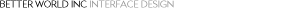
<style>
.page{position:relative;width:288px;height:8px;background:#ffffff}
.page>*{position:absolute;margin:0}
.t1{font:9.7px "MetroLite-Two";letter-spacing:-0.04em;color:#000000}
.t2{font:9.7px "MetroLite-Two";letter-spacing:-0.04em;color:#959595}
</style>
<div class="page">
<p class="t1" style="left:0px;top:0px;width:174px;height:8px">BETTER WORLD INC <span class="t2">INTERFACE DESIGN</span></p>
</div>
